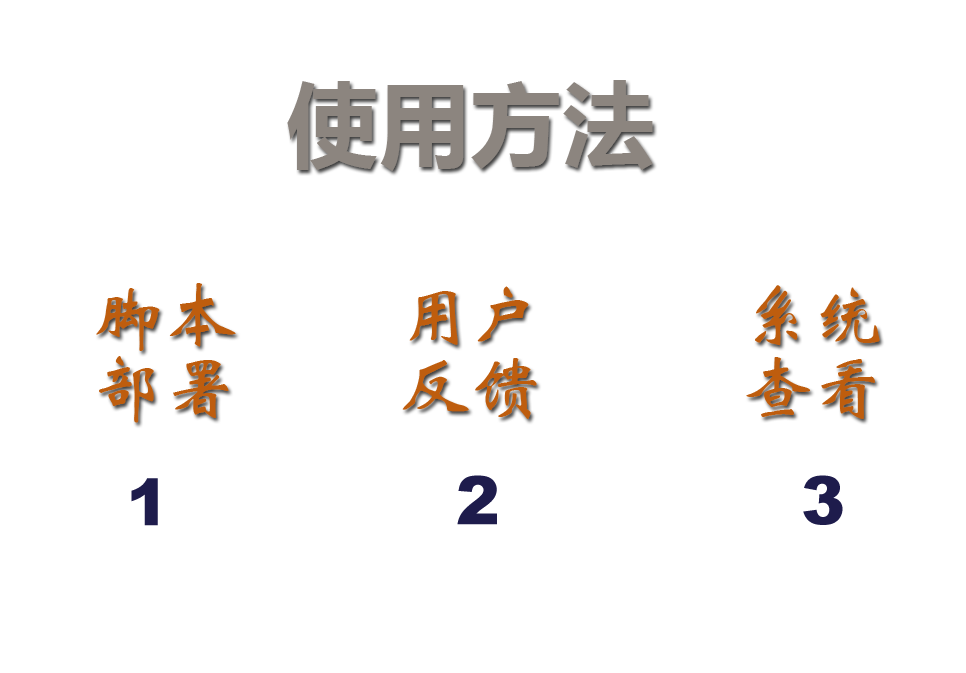
<style>
.page{position:relative;width:966px;height:673px;background:#ffffff}
.page>*{position:absolute;margin:0}
.t1{font:92px "MicrosoftYaHei-Bold";color:#8c857f}
.t2{font:72px/72px "STXinwei";color:#be5d0e}
</style>
<div class="page">
<p class="t1" style="left:287px;top:80px;width:366px;height:91px">使用方法</p>
<p class="t2" style="left:96px;top:283px;width:140px;height:140px">脚本<br>部署</p>
<p class="t2" style="left:402px;top:286px;width:135px;height:133px">用户<br>反馈</p>
<p class="t2" style="left:746px;top:285px;width:134px;height:134px">系统<br>查看</p>
</div>
